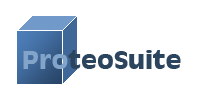
<style>
.page{position:relative;width:200px;height:100px;background:#ffffff}
.page>*{position:absolute;margin:0}
.t1{font:24px "AntiqueOlive-Bold";color:#2b455f}
.t2{font:24px "AntiqueOlive-Bold";color:#81a4c8}
</style>
<div class="page">
<p class="t1" style="left:23px;top:50px;width:158px;height:19px"><span class="t2">Pro</span>teoSuite</p>
</div>
